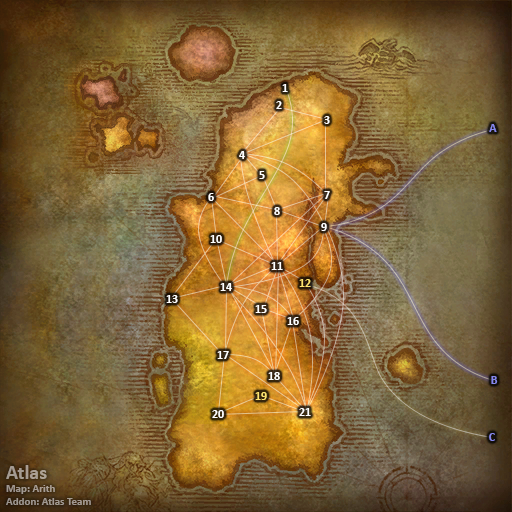
<style>
.page{position:relative;width:512px;height:512px}
.page>*{position:absolute;margin:0}
.t1{font:12px "Calibri-Bold";color:#ffffff}
.t2{font:12px "Calibri-Bold";color:#8788ee}
.t3{font:12px "Calibri-Bold";color:#fee570}
.t4{font:11px "Calibri-Bold";color:#a49b92}
.t5{font:20px "Calibri-Bold";color:#a49b92}
</style>
<div class="page">
<p class="t1" style="left:282px;top:84px;width:6px;height:8px">1</p>
<p class="t1" style="left:276px;top:101px;width:6px;height:8px">2</p>
<p class="t1" style="left:324px;top:116px;width:6px;height:8px">3</p>
<p class="t2" style="left:489px;top:124px;width:8px;height:8px">A</p>
<p class="t1" style="left:239px;top:151px;width:6px;height:8px">4</p>
<p class="t1" style="left:259px;top:171px;width:6px;height:8px">5</p>
<p class="t1" style="left:208px;top:193px;width:6px;height:8px">6</p>
<p class="t1" style="left:324px;top:191px;width:6px;height:8px">7</p>
<p class="t1" style="left:274px;top:207px;width:6px;height:8px">8</p>
<p class="t1" style="left:321px;top:223px;width:6px;height:8px">9</p>
<p class="t1" style="left:210px;top:235px;width:12px;height:8px">10</p>
<p class="t1" style="left:271px;top:262px;width:12px;height:8px">11</p>
<p class="t3" style="left:299px;top:279px;width:12px;height:8px">12</p>
<p class="t1" style="left:220px;top:283px;width:12px;height:8px">14</p>
<p class="t1" style="left:166px;top:295px;width:12px;height:8px">13</p>
<p class="t1" style="left:255px;top:305px;width:12px;height:8px">15</p>
<p class="t1" style="left:287px;top:317px;width:12px;height:8px">16</p>
<p class="t1" style="left:217px;top:351px;width:12px;height:8px">17</p>
<p class="t1" style="left:268px;top:372px;width:12px;height:8px">18</p>
<p class="t2" style="left:491px;top:376px;width:7px;height:8px">B</p>
<p class="t3" style="left:255px;top:392px;width:12px;height:8px">19</p>
<p class="t1" style="left:212px;top:410px;width:12px;height:8px">20</p>
<p class="t1" style="left:299px;top:408px;width:12px;height:8px">21</p>
<p class="t2" style="left:489px;top:433px;width:6px;height:8px">C</p>
<p class="t4" style="left:6px;top:465px;width:85px;height:40px"><span class="t5">Atlas<br></span>Map: Arith<br>Addon: Atlas Team</p>
</div>
